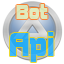
<style>
.page{position:relative;width:64px;height:64px;background:#ffffff}
.page>*{position:absolute;margin:0}
.t1{font:20px "AConceptoNrBold";color:#e2edb6}
.t2{font:31.6px "AConceptoNrBold";color:#2daff5}
</style>
<div class="page">
<p class="t1" style="left:16px;top:4px;width:32px;height:15px;opacity:0.85">Bot</p>
<p class="t2" style="left:10px;top:32px;width:44px;height:30px">Api</p>
</div>
